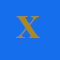
<style>
.page{position:relative;width:60px;height:60px;background:#156fed}
.page>*{position:absolute;margin:0}
.t1{font:33.3px "TimesNewRomanPS-BoldMT";color:#af8916}
</style>
<div class="page">
<p class="t1" style="left:16px;top:16px;width:24px;height:22px">X</p>
</div>
